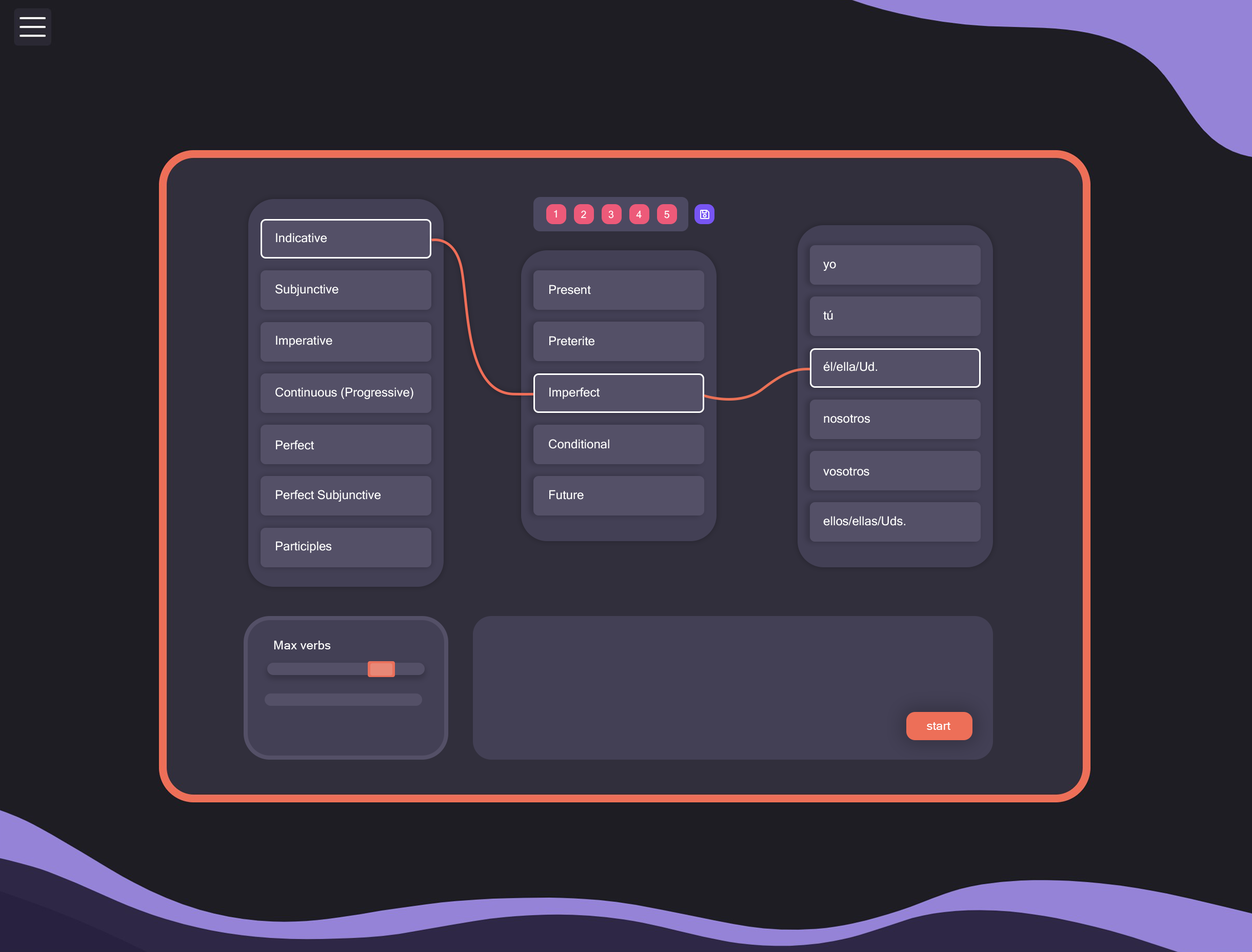
<style>
.page{position:relative;width:1252px;height:952px;background:#1e1d23}
.page>*{position:absolute;margin:0}
.t1{font:12.4px "MicrosoftSansSerif";color:#ffffff}
.t2{font:10px "MicrosoftSansSerif";color:#ffffff}
.t3{font:12.3px "MicrosoftSansSerif";color:#ffffff}
.t4{font:15.4px "MicrosoftSansSerif";color:#ffffff}
</style>
<div class="page">
<p class="t1" style="left:554px;top:210px;width:3px;height:8px"><span class="t2">1</span>cm1</p>
<p class="t1" style="left:581px;top:210px;width:5px;height:9px"><span class="t2">2</span>cm1</p>
<p class="t1" style="left:608px;top:210px;width:6px;height:9px"><span class="t2">3</span>cm1</p>
<p class="t2" style="left:636px;top:210px;width:6px;height:9px">4cm1</p>
<p class="t1" style="left:664px;top:210px;width:6px;height:9px"><span class="t2">5</span>m1</p>
<p class="t3" style="left:276px;top:233px;width:51px;height:10px">Indicative</p>
<p class="t3" style="left:823px;top:262px;width:13px;height:9px">yo</p>
<p class="t3" style="left:275px;top:284px;width:64px;height:12px">Subjunctive</p>
<p class="t3" style="left:549px;top:285px;width:42px;height:9px">Present</p>
<p class="t3" style="left:823px;top:310px;width:10px;height:10px">tú</p>
<p class="t3" style="left:276px;top:336px;width:56px;height:11px">Imperative</p>
<p class="t3" style="left:549px;top:336px;width:46px;height:10px">Preterite</p>
<p class="t3" style="left:823px;top:362px;width:54px;height:9px">él/ella/Ud.</p>
<p class="t3" style="left:275px;top:387px;width:139px;height:12px">Continuous (Progressive)</p>
<p class="t3" style="left:549px;top:387px;width:51px;height:12px">Imperfect</p>
<p class="t3" style="left:824px;top:415px;width:46px;height:8px">nosotros</p>
<p class="t3" style="left:276px;top:440px;width:38px;height:10px">Perfect</p>
<p class="t3" style="left:549px;top:439px;width:60px;height:10px">Conditional</p>
<p class="t3" style="left:823px;top:467px;width:47px;height:9px">vosotros</p>
<p class="t3" style="left:276px;top:490px;width:105px;height:12px">Perfect Subjunctive</p>
<p class="t3" style="left:549px;top:490px;width:35px;height:10px">Future</p>
<p class="t3" style="left:823px;top:516px;width:83px;height:10px">ellos/ellas/Uds.</p>
<p class="t3" style="left:276px;top:541px;width:55px;height:12px">Participles</p>
<p class="t3" style="left:927px;top:722px;width:24px;height:8px">start<span class="t4">vv</span></p>
</div>
